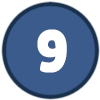
<style>
.page{position:relative;width:100px;height:100px;background:#3a5b8c}
.page>*{position:absolute;margin:0}
.t1{font:60px "LilitaOne";color:#ffffff}
</style>
<div class="page">
<p class="t1" style="left:37px;top:29px;width:30px;height:44px">9</p>
</div>
